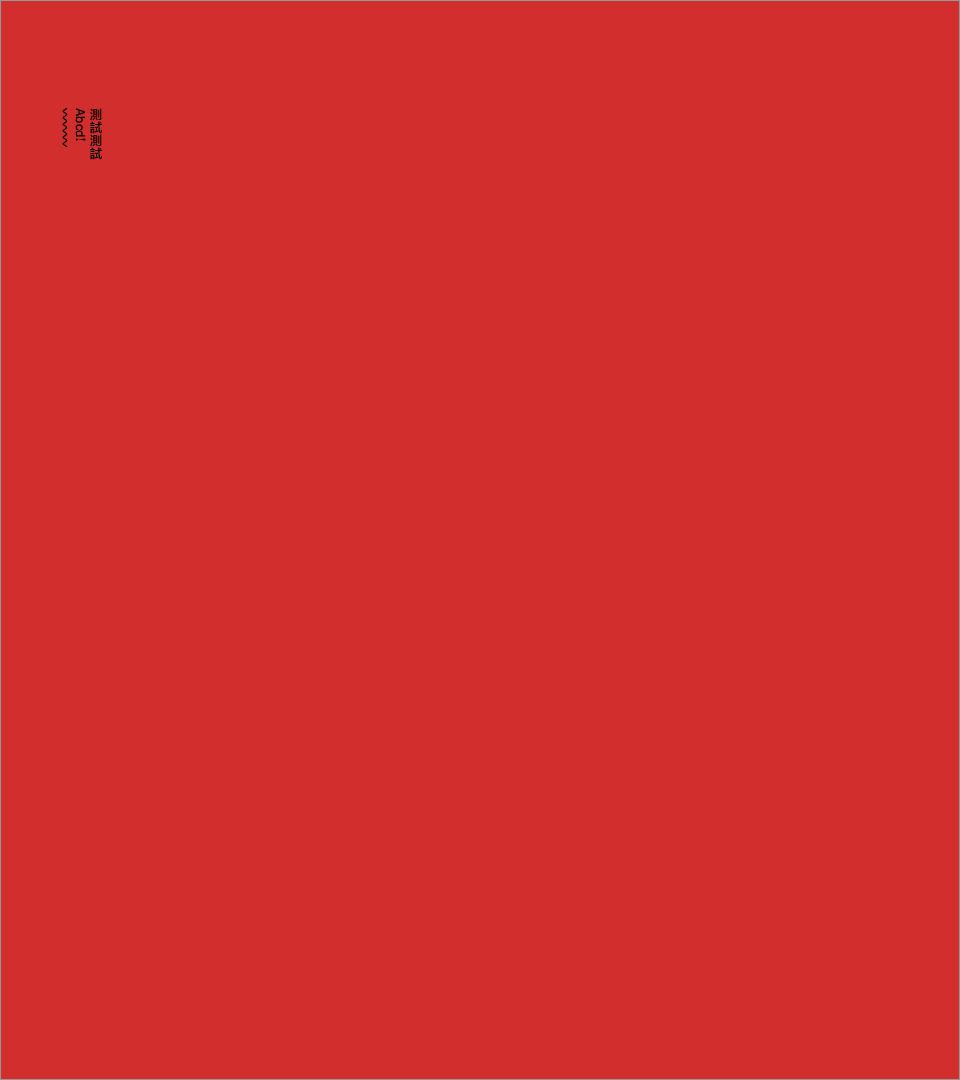
<style>
.page{position:relative;width:960px;height:1080px;background:#d32e2e}
.page>*{position:absolute;margin:0}
.t1{font:13px "toolboxHeiGB18030-DemiBold";color:#000000}
</style>
<div class="page">
<p class="t1" style="left:62px;top:108px;width:40px;height:52px">測試測試<br>Abcd!<br>~~~~~~</p>
</div>
